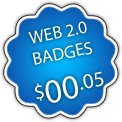
<style>
.page{position:relative;width:122px;height:122px;background:#ffffff}
.page>*{position:absolute;margin:0}
.t1{font:17.7px "MyriadPro-Regular";color:#ffffff;text-transform:uppercase}
.t2{font:21.2px "MyriadPro-Regular";color:#ffffff;text-transform:uppercase}
.t3{font:33.9px "MyriadPro-Regular";color:#ffffff;text-transform:uppercase}
</style>
<div class="page">
<p class="t1" style="left:28px;top:21px;width:76px;height:82px;text-align:center;rotate:-12deg">Web 2.0<br>badges<br><span class="t2">$</span><span class="t3">00</span><span class="t2">.05</span></p>
</div>
